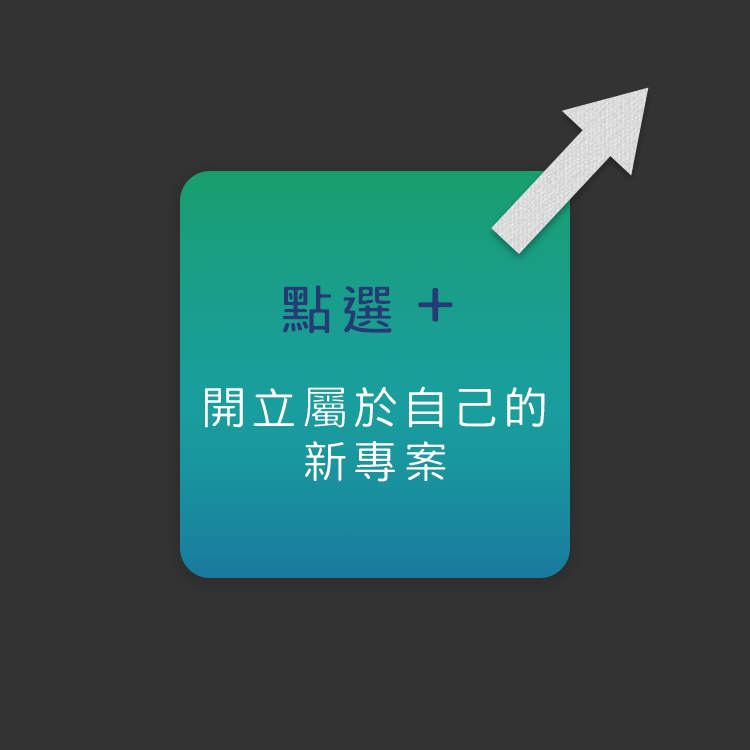
<style>
.page{position:relative;width:750px;height:750px;background:#333333}
.page>*{position:absolute;margin:0}
.t1{font:45.8px/53.4px "HanWangHeiLight";letter-spacing:0.1em;color:#ffffff}
.t2{font:53.4px/68.7px "HanWangHeiLight";letter-spacing:0.1em;color:#243c73;font-weight:bold}
.t3{font:68.7px/68.7px "HanWangHeiLight";letter-spacing:0.1em;color:#243c73;font-weight:bold}
</style>
<div class="page">
<p class="t1" style="left:205px;top:285px;width:340px;height:197px;text-align:center"><span class="t2">點選</span><span class="t3">＋<br><br></span>開立屬於自己的<br>新專案</p>
</div>
